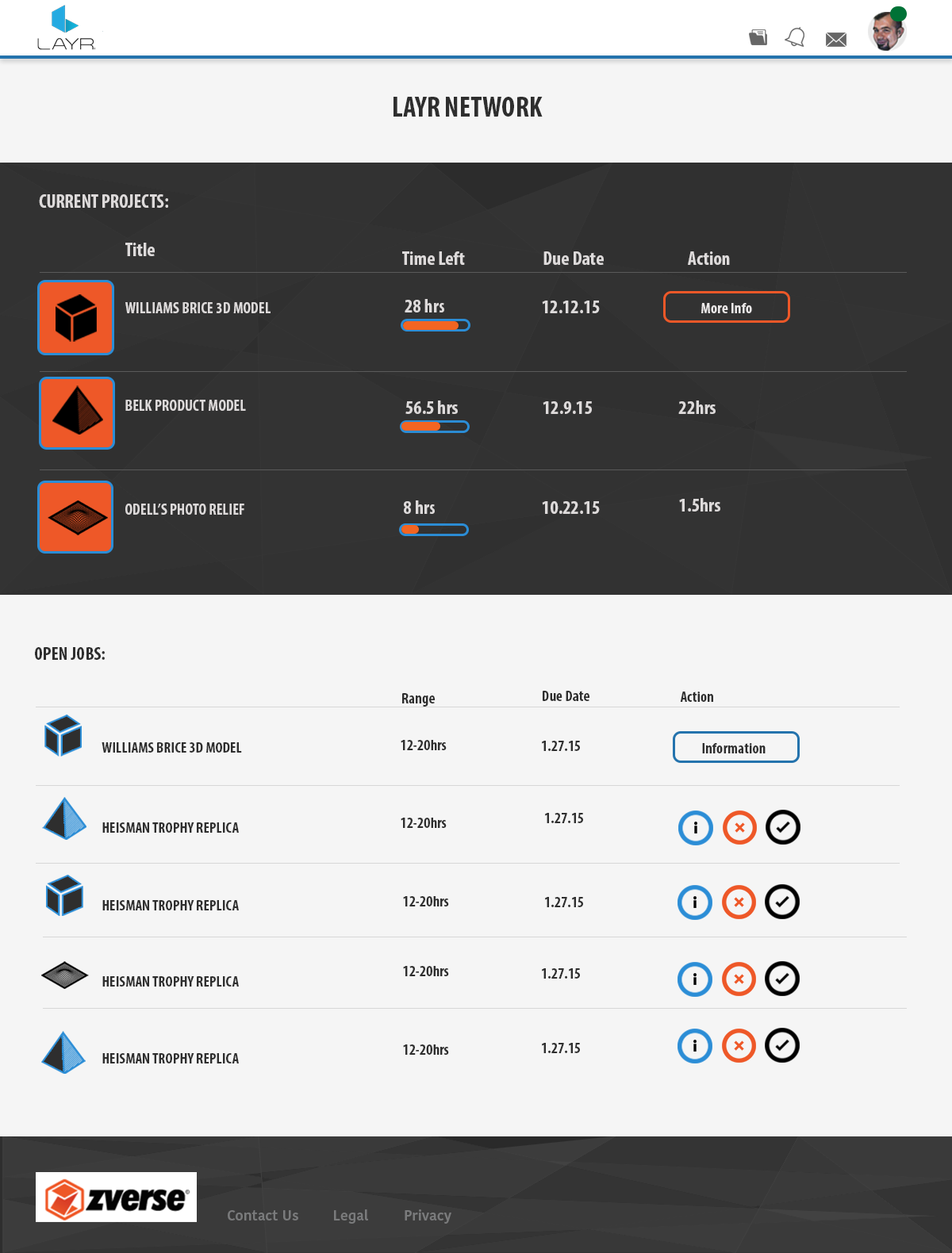
<style>
.page{position:relative;width:952px;height:1253px;background:#f5f5f5}
.page>*{position:absolute;margin:0}
.t1{font:28.5px "MyriadPro-BoldCond";color:#2e2e2e}
.t2{font:19px "MyriadPro-BoldCond";color:#dddada}
.t3{font:19.3px "MyriadPro-BoldCond";color:#dddada}
.t4{font:15.9px "MyriadPro-BoldCond";color:#dddada}
.t5{font:15.2px "MyriadPro-BoldCond";color:#ebe8e8}
.t6{font:18.3px "MyriadPro-BoldCond";color:#2e2e2e}
.t7{font:15.2px "MyriadPro-BoldCond";color:#2e2e2e}
.t8{font:14.3px "KohinoorDevanagari-Medium";color:#7a7b7c}
</style>
<div class="page">
<p class="t1" style="left:393px;top:97px;width:149px;height:20px">LAYR NETWORK</p>
<p class="t2" style="left:39px;top:194px;width:129px;height:14px">CURRENT PROJECTS:</p>
<p class="t3" style="left:125px;top:243px;width:30px;height:13px">Title</p>
<p class="t3" style="left:402px;top:251px;width:63px;height:14px">Time Left</p>
<p class="t3" style="left:543px;top:251px;width:61px;height:14px">Due Date</p>
<p class="t3" style="left:688px;top:251px;width:42px;height:14px">Action</p>
<p class="t4" style="left:125px;top:302px;width:145px;height:11px">WILLIAMS BRICE 3D MODEL</p>
<p class="t3" style="left:404px;top:299px;width:40px;height:13px">28 hrs</p>
<p class="t3" style="left:542px;top:301px;width:58px;height:12px">12.12.15</p>
<p class="t5" style="left:701px;top:303px;width:51px;height:10px">More Info</p>
<p class="t4" style="left:125px;top:400px;width:121px;height:11px">BELK PRODUCT MODEL</p>
<p class="t3" style="left:405px;top:400px;width:53px;height:14px">56.5 hrs</p>
<p class="t3" style="left:542px;top:401px;width:50px;height:13px">12.9.15</p>
<p class="t3" style="left:678px;top:400px;width:37px;height:14px">22hrs</p>
<p class="t4" style="left:125px;top:504px;width:119px;height:11px">ODELL’S PHOTO RELIEF</p>
<p class="t3" style="left:404px;top:500px;width:31px;height:14px">8 hrs</p>
<p class="t3" style="left:542px;top:501px;width:58px;height:13px">10.22.15</p>
<p class="t3" style="left:679px;top:498px;width:41px;height:14px">1.5hrs</p>
<p class="t6" style="left:35px;top:647px;width:70px;height:13px">OPEN JOBS:</p>
<p class="t7" style="left:402px;top:693px;width:33px;height:14px">Range</p>
<p class="t7" style="left:542px;top:691px;width:47px;height:10px">Due Date</p>
<p class="t7" style="left:680px;top:692px;width:33px;height:10px">Action</p>
<p class="t7" style="left:102px;top:742px;width:140px;height:11px">WILLIAMS BRICE 3D MODEL</p>
<p class="t7" style="left:400px;top:740px;width:46px;height:10px">12-20hrs</p>
<p class="t7" style="left:542px;top:741px;width:38px;height:10px">1.27.15</p>
<p class="t7" style="left:702px;top:743px;width:63px;height:10px">Information</p>
<p class="t7" style="left:400px;top:818px;width:46px;height:10px">12-20hrs</p>
<p class="t7" style="left:545px;top:813px;width:38px;height:10px">1.27.15</p>
<p class="t7" style="left:102px;top:822px;width:137px;height:11px">HEISMAN TROPHY REPLICA</p>
<p class="t7" style="left:102px;top:900px;width:137px;height:10px">HEISMAN TROPHY REPLICA</p>
<p class="t7" style="left:403px;top:896px;width:46px;height:10px">12-20hrs</p>
<p class="t7" style="left:545px;top:897px;width:38px;height:10px">1.27.15</p>
<p class="t7" style="left:403px;top:966px;width:46px;height:10px">12-20hrs</p>
<p class="t7" style="left:102px;top:976px;width:137px;height:11px">HEISMAN TROPHY REPLICA</p>
<p class="t7" style="left:542px;top:968px;width:38px;height:11px">1.27.15</p>
<p class="t7" style="left:403px;top:1044px;width:46px;height:11px">12-20hrs</p>
<p class="t7" style="left:542px;top:1043px;width:38px;height:10px">1.27.15</p>
<p class="t7" style="left:102px;top:1053px;width:137px;height:10px">HEISMAN TROPHY REPLICA</p>
<p class="t8" style="left:228px;top:1209px;width:223px;height:15px">Contact Us  Legal   Privacy Policy</p>
</div>
